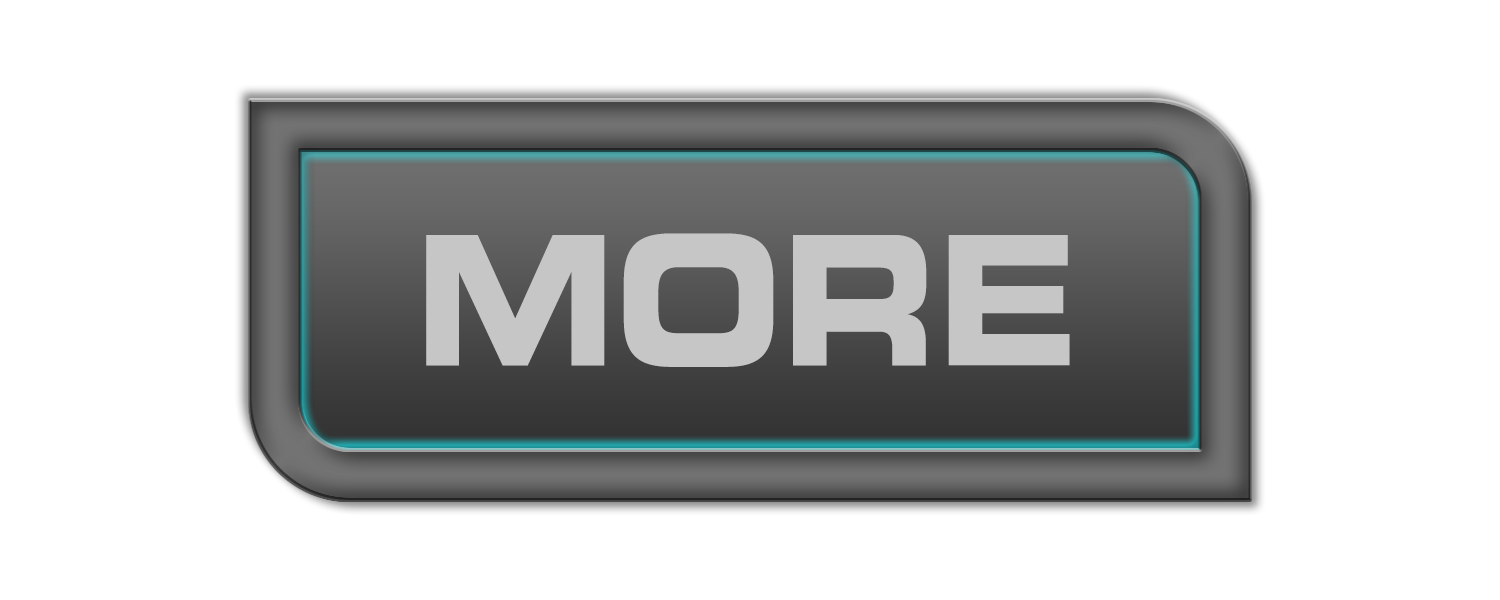
<style>
.page{position:relative;width:1500px;height:600px;background:#ffffff}
.page>*{position:absolute;margin:0}
.t1{font:180px "EurostileLTStd-BoldEx2";color:#c6c6c6;scale:0.83 1}
</style>
<div class="page">
<p class="t1" style="left:426px;top:233px;width:644px;height:134px">MORE</p>
</div>
